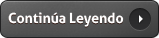
<style>
.page{position:relative;width:159px;height:38px}
.page>*{position:absolute;margin:0}
.t1{font:14px "Aller-Bold";color:#ffffff}
</style>
<div class="page">
<p class="t1" style="left:8px;top:12px;width:116px;height:15px">Continúa Leyendo</p>
</div>
